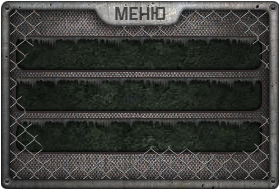
<style>
.page{position:relative;width:280px;height:190px}
.page>*{position:absolute;margin:0}
.t1{font:18px "Vox-Regular15";color:#444443}
</style>
<div class="page">
<p class="t1" style="left:115px;top:7px;width:51px;height:13px">МЕНЮ</p>
</div>
